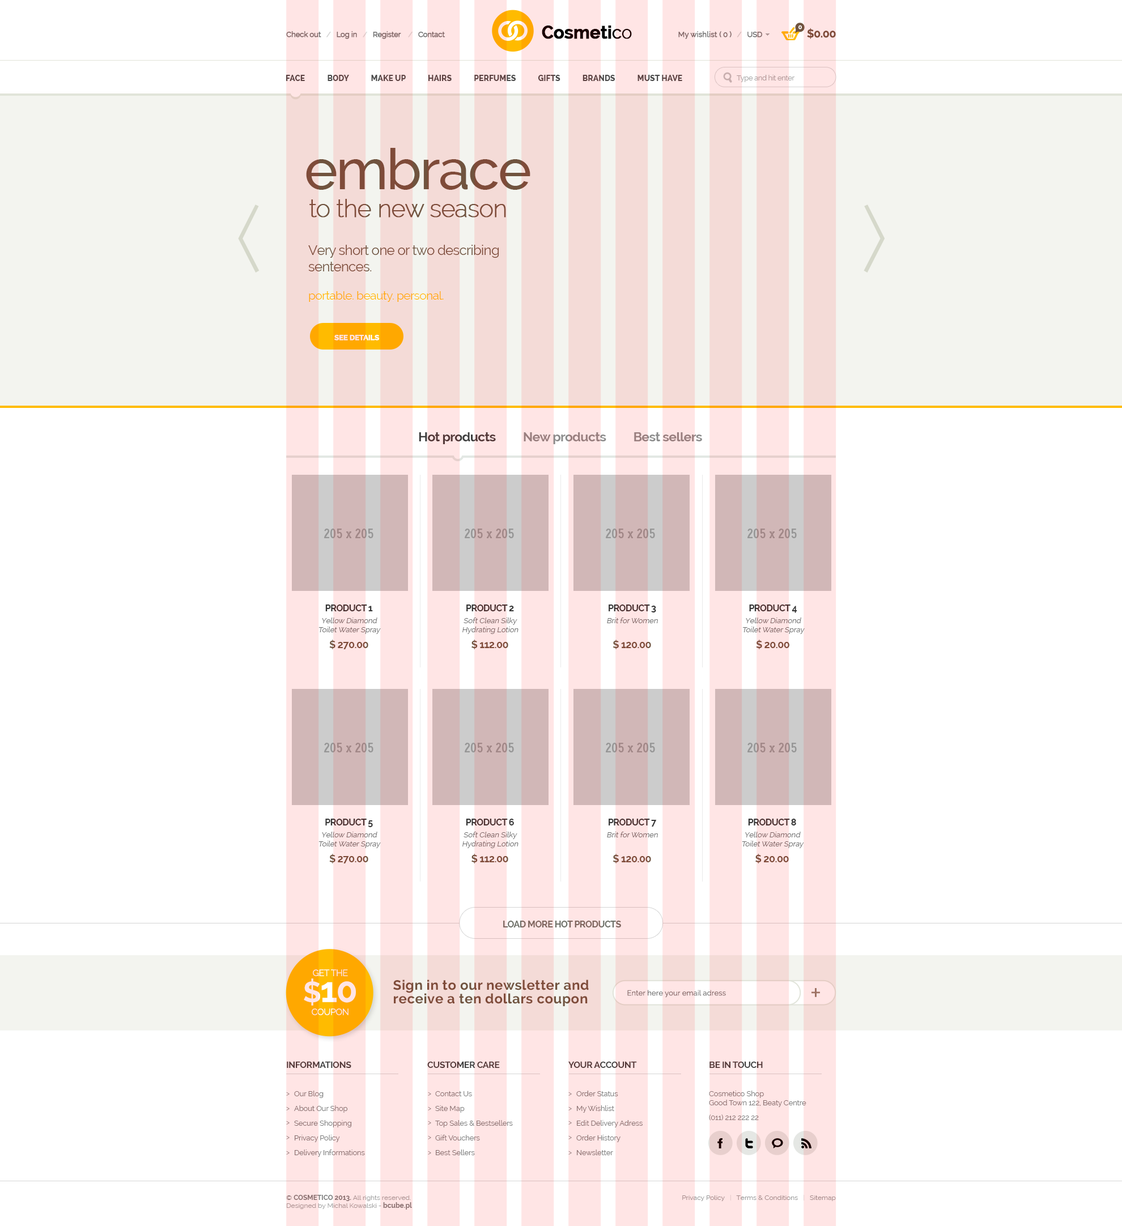
<style>
.page{position:relative;width:1122px;height:1226px;background:#ffffff}
.page>*{position:absolute;margin:0}
.t1{font:17.7px "Raleway-Bold";letter-spacing:-0.025em;font-weight:bold}
.t2{font:17.7px "Raleway";letter-spacing:-0.025em;font-weight:bold}
.t3{font:17.7px "Raleway-Light";letter-spacing:-0.025em;font-weight:bold}
.t4{font:6.1px "Raleway-Bold";letter-spacing:-0.03em;color:#ffffff}
.t5{font:11.3px "Raleway-Bold";letter-spacing:-0.03em;color:#70543f}
.t6{font:7.4px "Raleway";letter-spacing:-0.03em;color:#727272;font-weight:bold}
.t7{font:7.4px "Raleway";letter-spacing:-0.03em;color:#d5d5d5;font-weight:bold}
.t8{font:7.4px "Raleway";letter-spacing:-0.03em;color:#dcdcdc;font-weight:bold}
.t9{font:7.4px "Raleway";color:#727272;font-weight:bold}
.t10{font:7.9px "Raleway-ExtraBold";color:#4b4b4b}
.t11{font:7.4px "Raleway";letter-spacing:-0.03em;color:#a8a8a8}
.t12{font:56.6px "Raleway-Medium";letter-spacing:-0.03em;color:#70543f}
.t13{font:24.1px "Raleway-ExtraLight";letter-spacing:-0.03em;color:#70543f;font-weight:bold}
.t14{font:13.6px "Raleway";letter-spacing:-0.03em;color:#70543f}
.t15{font:11.9px "Raleway";letter-spacing:-0.03em;color:#ffbb00}
.t16{font:7.4px "Raleway-Bold";letter-spacing:-0.03em;color:#ffe5e5;font-weight:bold}
.t17{font:13px "Raleway-Bold";letter-spacing:-0.03em;color:#8d8d8d}
.t18{font:13px "Raleway-Bold";letter-spacing:-0.03em;color:#3e3e3e}
.t19{font:7.4px "Raleway";color:#6e6e6e;font-style:italic}
.t20{font:9.1px/3.5px "Raleway-Bold";letter-spacing:-0.03em;color:#353535}
.t21{font:10.2px "Raleway-Bold";letter-spacing:-0.03em;color:#70543f}
.t22{font:9.1px "Raleway-Bold";letter-spacing:-0.03em;color:#70726a}
.t23{font:9px/24px "Raleway";letter-spacing:-0.03em;color:#ffe5e5}
.t24{font:28.7px/26px "Raleway-Bold";letter-spacing:-0.03em;color:#ffe5e5}
.t25{font:34.5px/26px "Raleway-Bold";letter-spacing:-0.03em;color:#ffe5e5}
.t26{font:9px/13px "Raleway";letter-spacing:-0.03em;color:#ffe5e5}
.t27{font:13.6px/13.6px "Raleway-Bold";letter-spacing:0.025em;color:#70543f}
.t28{font:7.4px "Raleway";letter-spacing:0.01em;color:#717171}
.t29{font:9.1px "Raleway-Bold";letter-spacing:-0.03em;color:#3f3f3f}
.t30{font:7.4px/14.7px "Raleway";letter-spacing:-0.01em;color:#7b7b7b}
.t31{font:7.4px "Raleway";letter-spacing:-0.01em;color:#7b7b7b}
.t32{font:6.8px "Raleway";color:#a1a1a1}
.t33{font:6.8px "Raleway";color:#7b7b7b}
.t34{font:6.8px "Raleway-Bold";color:#7b7b7b}
.t35{font:6.8px "Raleway";color:#a3a3a3}
.t36{font:6.8px "Raleway";color:#999999}
.t37{font:6.8px "Raleway";color:#e0e0e0}
.t38{font:6.8px "Raleway";color:#e4e4e4}
</style>
<div class="page">
<p class="t1" style="left:542px;top:25px;width:90px;height:14px">Cosmeti<span class="t2">c</span><span class="t3">o</span></p>
<p class="t4" style="left:798px;top:25px;width:4px;height:4px">0</p>
<p class="t5" style="left:807px;top:28px;width:29px;height:11px">$0.00</p>
<p class="t6" style="left:286px;top:31px;width:159px;height:8px">Check out   <span class="t7">/</span>   Log in   <span class="t8">/</span>   Register    <span class="t8">/</span>   Contact</p>
<p class="t9" style="left:678px;top:31px;width:84px;height:8px">My wishlist <span class="t6">( 0 )   </span><span class="t7">/</span><span class="t6">   USD</span></p>
<p class="t10" style="left:286px;top:75px;width:396px;height:6px">FACE            BODY            MAKE UP            HAIRS            PERFUMES            GIFTS            BRANDS            MUST HAVE</p>
<p class="t11" style="left:736px;top:75px;width:58px;height:7px">Type and hit enter</p>
<p class="t12" style="left:306px;top:148px;width:224px;height:42px">embrace</p>
<p class="t13" style="left:309px;top:199px;width:197px;height:19px">to the new season</p>
<p class="t14" style="left:308px;top:245px;width:191px;height:26px">Very short one or two describing<br>sentences.</p>
<p class="t15" style="left:309px;top:291px;width:135px;height:11px">portable. beauty. personal.</p>
<p class="t16" style="left:334px;top:335px;width:46px;height:5px">SEE DETAILS</p>
<p class="t17" style="left:419px;top:432px;width:283px;height:12px"><span class="t18">Hot products          </span>New products          Best sellers</p>
<p class="t19" style="left:318px;top:604px;width:63px;height:30px;text-align:center"><span class="t20">PRODUCT 1<br><br></span>Yellow Diamond<br>Toilet Water Spray</p>
<p class="t19" style="left:462px;top:604px;width:56px;height:30px;text-align:center"><span class="t20">PRODUCT 2<br><br></span>Soft Clean Silky<br>Hydrating Lotion</p>
<p class="t19" style="left:607px;top:604px;width:51px;height:19px;text-align:center"><span class="t20">PRODUCT 3<br><br></span>Brit for Women</p>
<p class="t19" style="left:743px;top:604px;width:61px;height:30px;text-align:center"><span class="t20">PRODUCT 4<br><br></span>Yellow Diamond<br>Toilet Water Spray</p>
<p class="t21" style="left:329px;top:640px;width:39px;height:9px">$ 270.00</p>
<p class="t21" style="left:471px;top:640px;width:37px;height:9px">$ 112.00</p>
<p class="t21" style="left:612px;top:640px;width:39px;height:9px">$ 120.00</p>
<p class="t21" style="left:756px;top:640px;width:33px;height:9px">$ 20.00</p>
<p class="t19" style="left:318px;top:819px;width:63px;height:29px;text-align:center"><span class="t20">PRODUCT 5<br><br></span>Yellow Diamond<br>Toilet Water Spray</p>
<p class="t19" style="left:462px;top:819px;width:56px;height:29px;text-align:center"><span class="t20">PRODUCT 6<br><br></span>Soft Clean Silky<br>Hydrating Lotion</p>
<p class="t19" style="left:607px;top:819px;width:51px;height:18px;text-align:center"><span class="t20">PRODUCT 7<br><br></span>Brit for Women</p>
<p class="t19" style="left:742px;top:819px;width:62px;height:29px;text-align:center"><span class="t20">PRODUCT 8<br><br></span>Yellow Diamond<br>Toilet Water Spray</p>
<p class="t21" style="left:329px;top:854px;width:39px;height:9px">$ 270.00</p>
<p class="t21" style="left:471px;top:854px;width:37px;height:9px">$ 112.00</p>
<p class="t21" style="left:612px;top:854px;width:39px;height:9px">$ 120.00</p>
<p class="t21" style="left:755px;top:854px;width:34px;height:9px">$ 20.00</p>
<p class="t22" style="left:503px;top:921px;width:118px;height:6px">LOAD MORE HOT PRODUCTS</p>
<p class="t23" style="left:304px;top:969px;width:52px;height:46px;text-align:center">GET THE<br><span class="t24">$</span><span class="t25">10<br></span><span class="t26">COUPON</span></p>
<p class="t27" style="left:393px;top:979px;width:196px;height:27px">Sign in to our newsletter and<br>receive a ten dollars coupon</p>
<p class="t28" style="left:627px;top:990px;width:99px;height:8px">Enter here your email adress</p>
<p class="t29" style="left:287px;top:1061px;width:64px;height:7px">INFORMATIONS</p>
<p class="t29" style="left:427px;top:1061px;width:73px;height:7px">CUSTOMER CARE</p>
<p class="t29" style="left:568px;top:1061px;width:69px;height:7px">YOUR ACCOUNT</p>
<p class="t29" style="left:709px;top:1061px;width:54px;height:7px">BE IN TOUCH</p>
<p class="t30" style="left:294px;top:1091px;width:71px;height:66px">Our Blog<br>About Our Shop<br>Secure Shopping<br>Privacy Policy<br>Delivery Informations</p>
<p class="t30" style="left:435px;top:1091px;width:78px;height:64px">Contact Us<br>Site Map<br>Top Sales &amp; Bestsellers<br>Gift Vouchers<br>Best Sellers</p>
<p class="t30" style="left:576px;top:1091px;width:66px;height:64px">Order Status<br>My Wishlist<br>Edit Delivery Adress<br>Order History<br>Newsletter</p>
<p class="t31" style="left:709px;top:1091px;width:97px;height:30px"><span class="t30">Cosmetico Shop</span><br>Good Town 122, Beaty Centre<br><span class="t30">(011) 212 222 22</span></p>
<p class="t32" style="left:286px;top:1195px;width:126px;height:14px"><span class="t33">© </span><span class="t34">COSMETICO 2013. </span><span class="t35">All rights reserved.<br></span>Designed by Michal Kowalski - <span class="t34">bcube.pl</span></p>
<p class="t36" style="left:682px;top:1195px;width:154px;height:6px">Privacy Policy   <span class="t37">|</span>   Terms &amp; Conditions   <span class="t38">|</span>   Sitemap</p>
</div>
